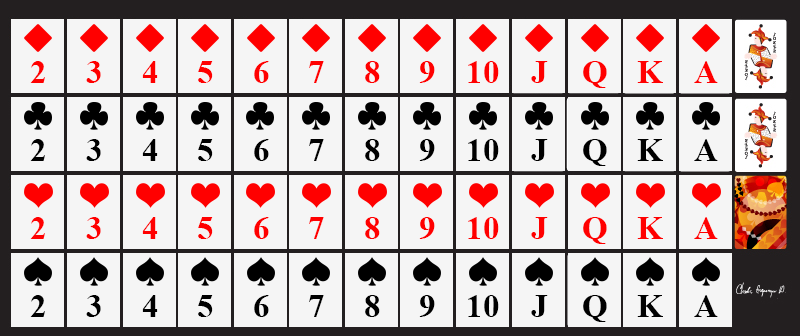
<style>
.page{position:relative;width:800px;height:336px;background:#f5f5f5}
.page>*{position:absolute;margin:0}
.t1{font:32.8px "TimesNewRomanPS-BoldMT";color:#ff0000}
.t2{font:32.8px "TimesNewRomanPS-BoldMT";color:#000000}
</style>
<div class="page">
<p class="t1" style="left:30px;top:61px;width:15px;height:22px">2</p>
<p class="t1" style="left:86px;top:61px;width:15px;height:22px">3</p>
<p class="t1" style="left:142px;top:61px;width:16px;height:22px">4</p>
<p class="t1" style="left:198px;top:61px;width:15px;height:22px">5</p>
<p class="t1" style="left:254px;top:61px;width:15px;height:22px">6</p>
<p class="t1" style="left:309px;top:61px;width:15px;height:22px">7</p>
<p class="t1" style="left:365px;top:61px;width:15px;height:22px">8</p>
<p class="t1" style="left:419px;top:61px;width:16px;height:22px">9</p>
<p class="t1" style="left:468px;top:61px;width:31px;height:22px">10</p>
<p class="t1" style="left:531px;top:61px;width:17px;height:22px">J</p>
<p class="t1" style="left:583px;top:61px;width:24px;height:27px">Q</p>
<p class="t1" style="left:637px;top:61px;width:26px;height:22px">K</p>
<p class="t1" style="left:694px;top:61px;width:24px;height:22px">A</p>
<p class="t2" style="left:30px;top:139px;width:15px;height:22px">2</p>
<p class="t2" style="left:86px;top:139px;width:15px;height:22px">3</p>
<p class="t2" style="left:142px;top:139px;width:16px;height:22px">4</p>
<p class="t2" style="left:198px;top:139px;width:15px;height:22px">5</p>
<p class="t2" style="left:254px;top:139px;width:15px;height:22px">6</p>
<p class="t2" style="left:309px;top:139px;width:15px;height:22px">7</p>
<p class="t2" style="left:365px;top:139px;width:15px;height:22px">8</p>
<p class="t2" style="left:419px;top:139px;width:16px;height:22px">9</p>
<p class="t2" style="left:468px;top:139px;width:31px;height:22px">10</p>
<p class="t2" style="left:531px;top:139px;width:17px;height:22px">J</p>
<p class="t2" style="left:583px;top:139px;width:24px;height:27px">Q</p>
<p class="t2" style="left:637px;top:139px;width:26px;height:22px">K</p>
<p class="t2" style="left:694px;top:139px;width:24px;height:22px">A</p>
<p class="t1" style="left:30px;top:217px;width:15px;height:22px">2</p>
<p class="t1" style="left:86px;top:217px;width:15px;height:22px">3</p>
<p class="t1" style="left:142px;top:217px;width:16px;height:22px">4</p>
<p class="t1" style="left:198px;top:217px;width:15px;height:22px">5</p>
<p class="t1" style="left:254px;top:217px;width:15px;height:22px">6</p>
<p class="t1" style="left:309px;top:217px;width:15px;height:22px">7</p>
<p class="t1" style="left:365px;top:217px;width:15px;height:22px">8</p>
<p class="t1" style="left:419px;top:217px;width:16px;height:22px">9</p>
<p class="t1" style="left:468px;top:217px;width:31px;height:22px">10</p>
<p class="t1" style="left:531px;top:217px;width:17px;height:22px">J</p>
<p class="t1" style="left:583px;top:217px;width:24px;height:27px">Q</p>
<p class="t1" style="left:637px;top:217px;width:26px;height:22px">K</p>
<p class="t1" style="left:694px;top:217px;width:24px;height:22px">A</p>
<p class="t2" style="left:30px;top:295px;width:15px;height:22px">2</p>
<p class="t2" style="left:86px;top:295px;width:15px;height:22px">3</p>
<p class="t2" style="left:142px;top:295px;width:16px;height:22px">4</p>
<p class="t2" style="left:198px;top:295px;width:15px;height:22px">5</p>
<p class="t2" style="left:254px;top:295px;width:15px;height:22px">6</p>
<p class="t2" style="left:309px;top:295px;width:15px;height:22px">7</p>
<p class="t2" style="left:365px;top:295px;width:15px;height:22px">8</p>
<p class="t2" style="left:419px;top:295px;width:16px;height:22px">9</p>
<p class="t2" style="left:468px;top:295px;width:31px;height:22px">10</p>
<p class="t2" style="left:531px;top:295px;width:17px;height:22px">J</p>
<p class="t2" style="left:583px;top:295px;width:24px;height:27px">Q</p>
<p class="t2" style="left:637px;top:295px;width:26px;height:22px">K</p>
<p class="t2" style="left:694px;top:295px;width:24px;height:22px">A</p>
</div>
